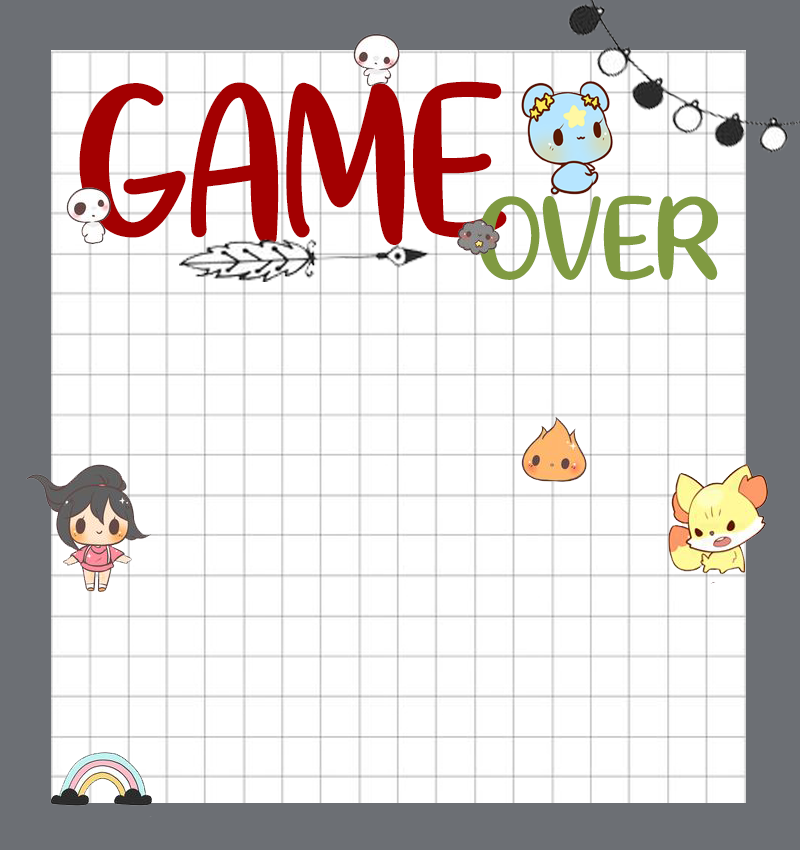
<style>
.page{position:relative;width:800px;height:850px;background:#ffffff}
.page>*{position:absolute;margin:0}
.t1{font:250px "QuiteMagical-Regular";color:#a30001}
.t2{font:134.9px "QuiteMagical-Regular";color:#809a41}
</style>
<div class="page">
<p class="t1" style="left:79px;top:81px;width:428px;height:164px">GAME</p>
<p class="t2" style="left:478px;top:195px;width:240px;height:85px">OVER</p>
</div>
